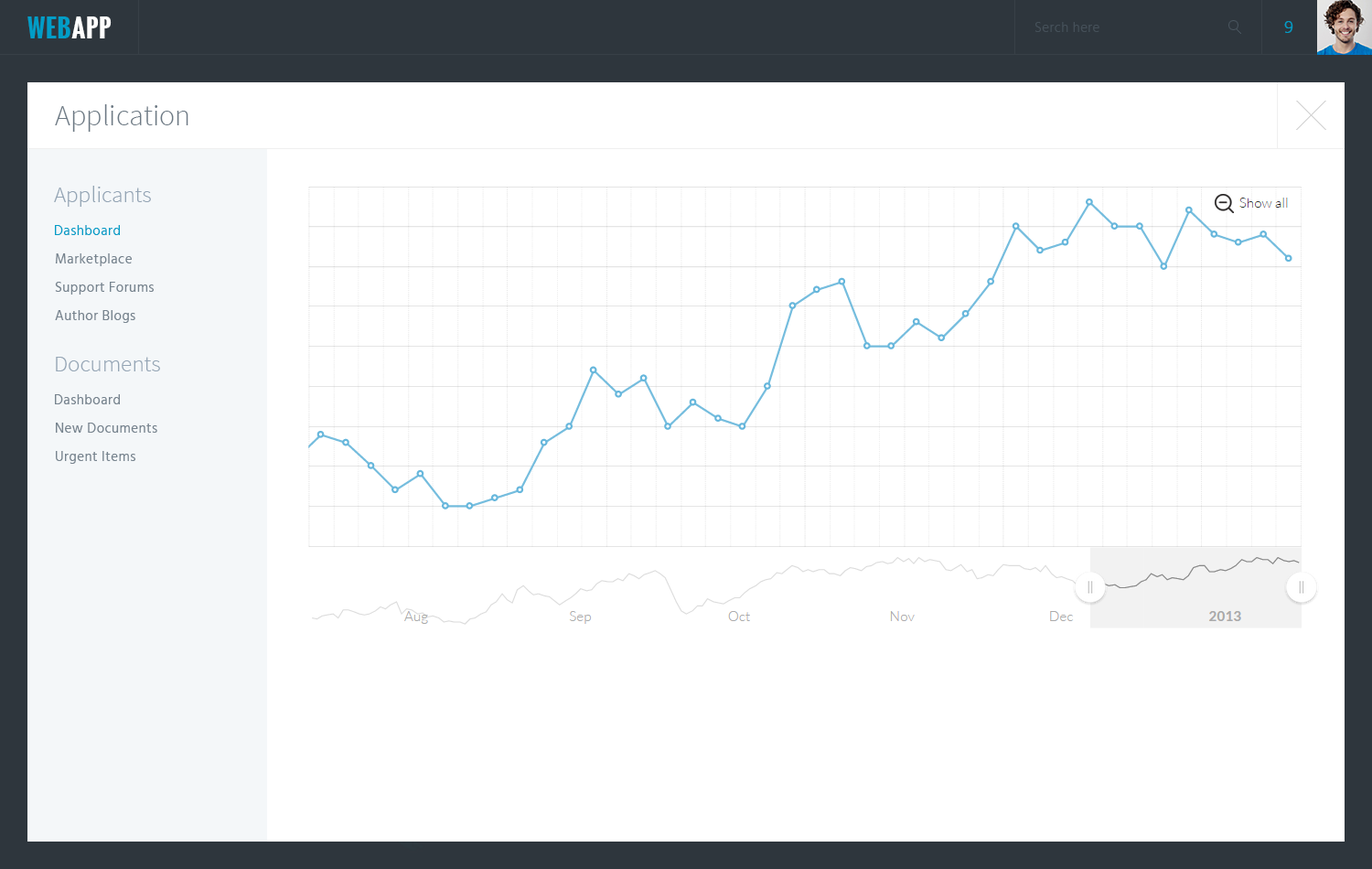
<style>
.page{position:relative;width:1372px;height:869px;background:#ffffff}
.page>*{position:absolute;margin:0}
.t1{font:24.7px "Oswald-Bold";letter-spacing:0.03em;color:#009dc7;text-transform:uppercase}
.t2{font:24.7px "Oswald-Bold";letter-spacing:0.03em;color:#ffffff;text-transform:uppercase}
.t3{font:13.7px "Hind-Light";letter-spacing:0.03em;color:#46515a}
.t4{font:18.3px "Hind-Light";letter-spacing:0.03em;color:#009dc7}
.t5{font:29.3px "SourceSansPro-Light";color:#6c7984}
.t6{font:22.9px "SourceSansPro-Light";color:#94a5b5}
.t7{font:13.7px "Hind-Regular";letter-spacing:0.03em;color:#009dc7}
.t8{font:13.7px "Hind-Regular";letter-spacing:0.03em;color:#77848f}
</style>
<div class="page">
<p class="t1" style="left:27px;top:16px;width:85px;height:22px">Web<span class="t2">App</span></p>
<p class="t3" style="left:1036px;top:22px;width:64px;height:10px">Serch here</p>
<p class="t4" style="left:1284px;top:21px;width:9px;height:12px">9</p>
<p class="t5" style="left:55px;top:104px;width:133px;height:28px">Application</p>
<p class="t6" style="left:54px;top:186px;width:97px;height:21px">Applicants</p>
<p class="t7" style="left:55px;top:225px;width:65px;height:10px">Dashboard</p>
<p class="t8" style="left:55px;top:253px;width:77px;height:13px">Marketplace</p>
<p class="t8" style="left:55px;top:282px;width:99px;height:13px">Support Forums</p>
<p class="t8" style="left:55px;top:310px;width:80px;height:13px">Author Blogs</p>
<p class="t6" style="left:56px;top:357px;width:104px;height:14px">Documents</p>
<p class="t8" style="left:55px;top:394px;width:65px;height:10px">Dashboard</p>
<p class="t8" style="left:56px;top:423px;width:101px;height:10px">New Documents</p>
<p class="t8" style="left:56px;top:451px;width:79px;height:13px">Urgent Items</p>
</div>
